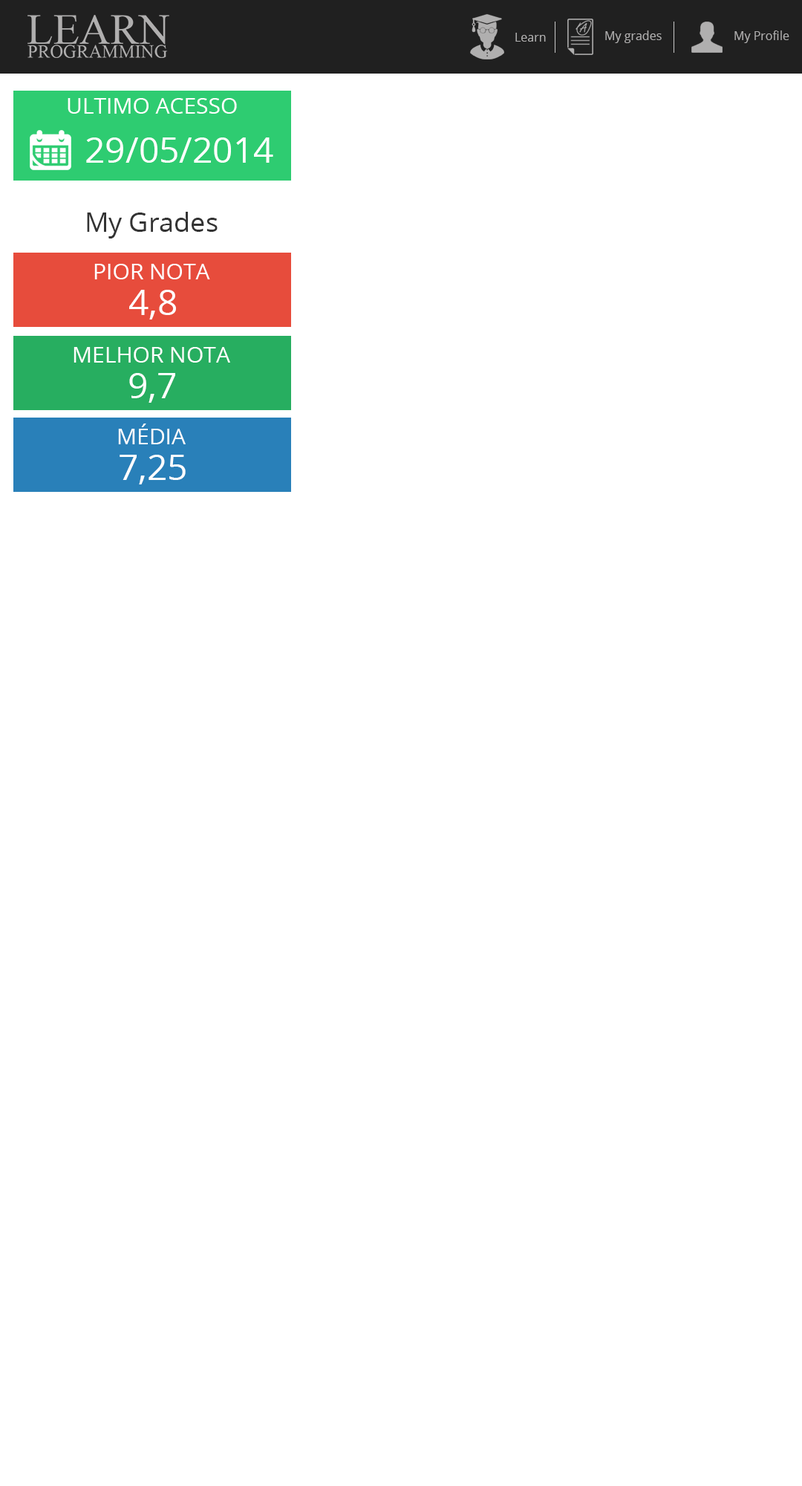
<style>
.page{position:relative;width:802px;height:1486px;background:#ffffff}
.page>*{position:absolute;margin:0}
.t1{font:11.9px "OpenSans";color:#b0afaf}
.t2{font:11.9px "OpenSans";color:#b0afaf;text-transform:uppercase}
.t3{font:22.3px "OpenSans";color:#ffffff}
.t4{font:35.7px "OpenSans";color:#ffffff}
.t5{font:26.7px "OpenSans";color:#333333}
</style>
<div class="page">
<p class="t1" style="left:516px;top:33px;width:30px;height:9px">Learn</p>
<p class="t1" style="left:606px;top:30px;width:56px;height:13px"><span class="t2">M</span>y grades</p>
<p class="t1" style="left:735px;top:30px;width:55px;height:13px">My Profile</p>
<p class="t3" style="left:68px;top:98px;width:169px;height:16px">ULTIMO ACESSO</p>
<p class="t4" style="left:86px;top:137px;width:187px;height:26px">29/05/2014</p>
<p class="t5" style="left:87px;top:212px;width:131px;height:27px">My Grades</p>
<p class="t3" style="left:94px;top:264px;width:116px;height:15px">PIOR NOTA</p>
<p class="t4" style="left:129px;top:290px;width:47px;height:29px">4,8</p>
<p class="t3" style="left:74px;top:347px;width:156px;height:16px">MELHOR NOTA</p>
<p class="t4" style="left:129px;top:373px;width:46px;height:30px">9,7</p>
<p class="t3" style="left:118px;top:424px;width:68px;height:20px">MÉDIA</p>
<p class="t4" style="left:120px;top:455px;width:66px;height:29px">7,25</p>
</div>
